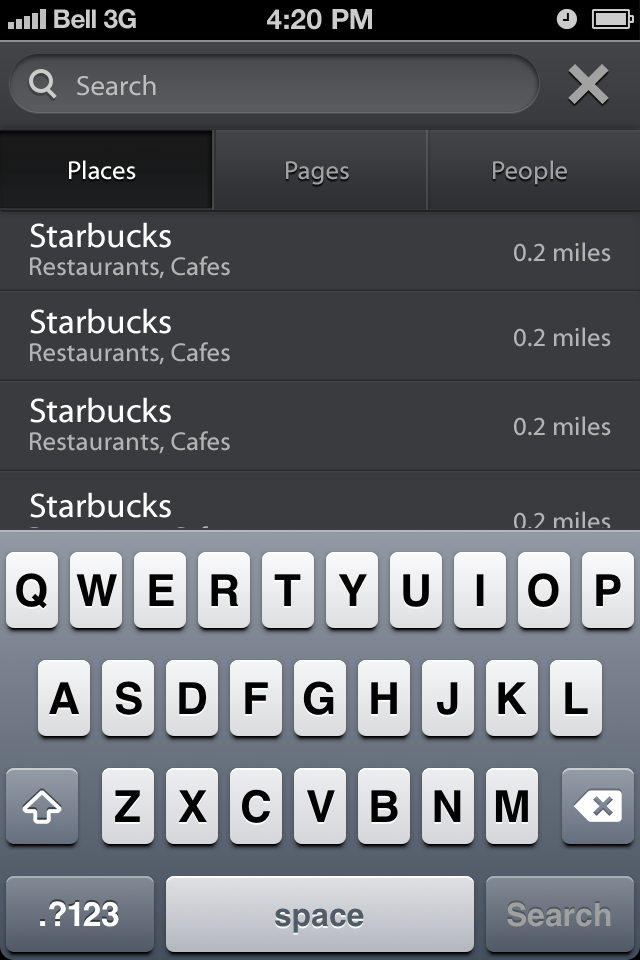
<style>
.page{position:relative;width:640px;height:960px;background:#3a3b3f}
.page>*{position:absolute;margin:0}
.t1{font:26px "HelveticaNeue-Bold";color:#cccccc}
.t2{font:26px "HelveticaNeue-Bold";color:#cccccc;text-transform:uppercase}
.t3{font:28px "HelveticaNeue-Bold";color:#cccccc;text-transform:uppercase}
.t4{font:28px "MyriadWebPro";color:#bebebe}
.t5{font:26px "MyriadWebPro";color:#ffffff}
.t6{font:26px "MyriadWebPro";color:#a2a2a2}
.t7{font:34px "MyriadWebPro";color:#ffffff}
.t8{font:26px "MyriadWebPro";color:#b4b3b4}
</style>
<div class="page">
<p class="t1" style="left:54px;top:9px;width:42px;height:20px">Bell</p>
<p class="t2" style="left:104px;top:9px;width:32px;height:20px">3G</p>
<p class="t3" style="left:267px;top:9px;width:105px;height:21px">4:20 pM</p>
<p class="t4" style="left:77px;top:75px;width:79px;height:21px">Search</p>
<p class="t5" style="left:69px;top:160px;width:67px;height:20px">Places</p>
<p class="t6" style="left:286px;top:161px;width:63px;height:24px">Pages</p>
<p class="t6" style="left:493px;top:160px;width:74px;height:25px">People</p>
<p class="t7" style="left:30px;top:222px;width:141px;height:26px">Starbucks</p>
<p class="t8" style="left:514px;top:242px;width:97px;height:20px">0.2 miles</p>
<p class="t8" style="left:30px;top:256px;width:200px;height:23px">Restaurants, Cafes</p>
<p class="t7" style="left:30px;top:308px;width:141px;height:26px">Starbucks</p>
<p class="t8" style="left:514px;top:327px;width:97px;height:20px">0.2 miles</p>
<p class="t8" style="left:30px;top:342px;width:200px;height:23px">Restaurants, Cafes</p>
<p class="t7" style="left:30px;top:397px;width:141px;height:26px">Starbucks</p>
<p class="t8" style="left:514px;top:416px;width:97px;height:20px">0.2 miles</p>
<p class="t8" style="left:30px;top:431px;width:200px;height:23px">Restaurants, Cafes</p>
<p class="t7" style="left:30px;top:492px;width:141px;height:26px">Starbucks</p>
<p class="t8" style="left:514px;top:511px;width:97px;height:20px">0.2 miles</p>
</div>
